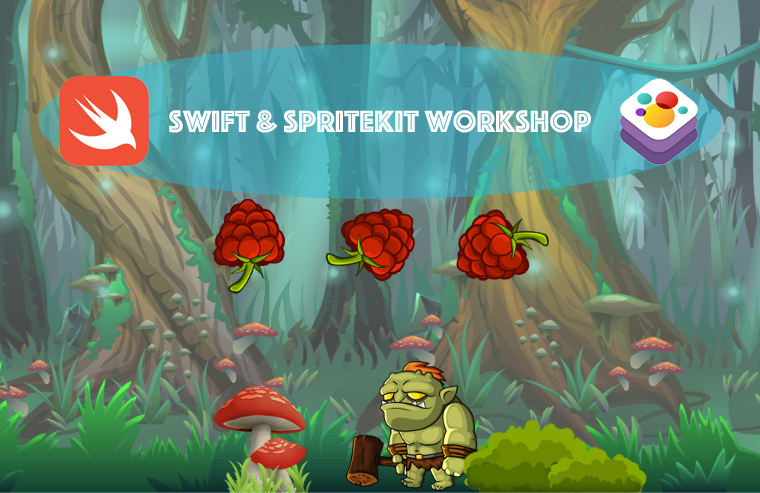
<style>
.page{position:relative;width:760px;height:493px}
.page>*{position:absolute;margin:0}
.t1{font:32px "Phosphate-Inline";color:#ffffff}
</style>
<div class="page">
<p class="t1" style="left:169px;top:110px;width:422px;height:23px">Swift &amp; SpriteKit Workshop</p>
</div>
